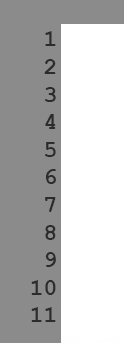
<style>
.page{position:relative;width:124px;height:343px;background:#8b8b8b}
.page>*{position:absolute;margin:0}
.t1{font:23px "CourierNewPS-BoldMT";color:#2c2c2c}
</style>
<div class="page">
<p class="t1" style="left:31px;top:31px;width:25px;height:291px">1<br> 2<br> 3<br> 4<br> 5<br> 6<br> 7<br> 8<br> 9<br>10<br>11</p>
</div>
